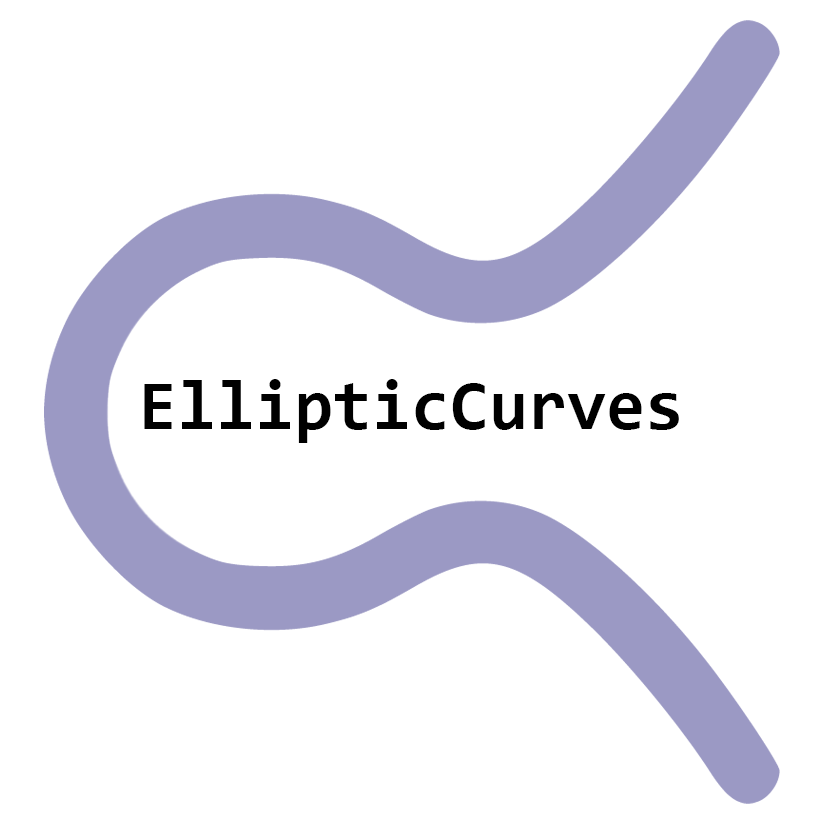
<style>
.page{position:relative;width:824px;height:824px;background:#ffffff}
.page>*{position:absolute;margin:0}
.t1{font:70.8px "Consolas-Bold";color:#000000}
</style>
<div class="page">
<p class="t1" style="left:144px;top:379px;width:535px;height:64px">EllipticCurves</p>
</div>
